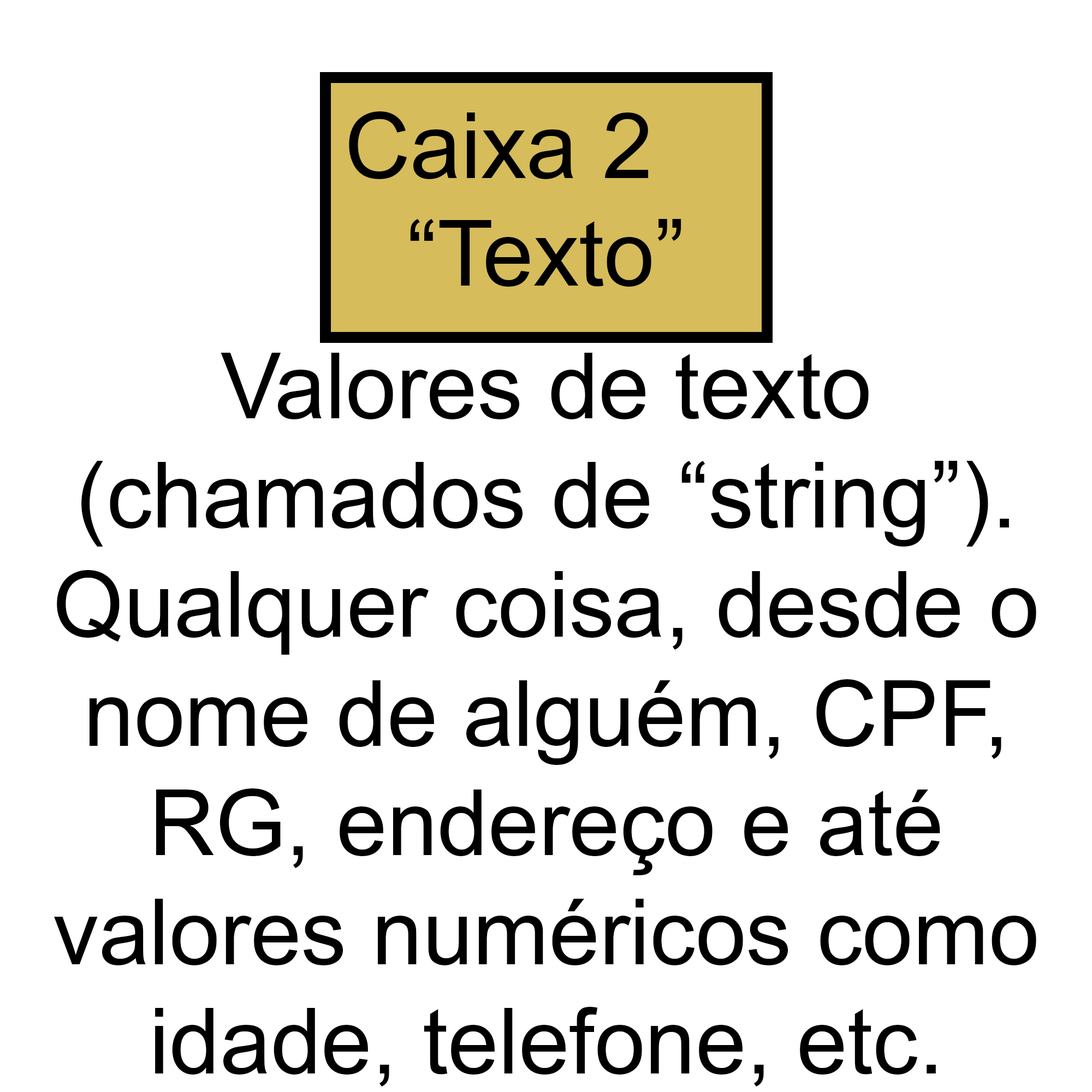
<style>
.page{position:relative;width:1092px;height:1092px;background:#ffffff}
.page>*{position:absolute;margin:0}
.t1{font:91px "ArialMT";color:#000000}
</style>
<div class="page">
<p class="t1" style="left:349px;top:111px;width:300px;height:68px">Caixa 2</p>
<p class="t1" style="left:410px;top:219px;width:271px;height:68px">“Texto”</p>
<p class="t1" style="left:54px;top:353px;width:982px;height:734px;text-align:center">Valores de texto<br>(chamados de “string”).<br>Qualquer coisa, desde o<br>nome de alguém, CPF,<br>RG, endereço e até<br>valores numéricos como<br>idade, telefone, etc.</p>
</div>
